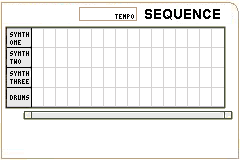
<style>
.page{position:relative;width:240px;height:160px;background:#ffffff}
.page>*{position:absolute;margin:0}
.t1{font:7px "Terminal";color:#000000}
.t2{font:14px "Arial-BoldMT";color:#000000}
</style>
<div class="page">
<p class="t1" style="left:115px;top:14px;width:19px;height:5px">TEMPO</p>
<p class="t2" style="left:145px;top:9px;width:75px;height:11px">SEQUENCE</p>
<p class="t1" style="left:10px;top:32px;width:19px;height:13px">SYNTH<br>ONE</p>
<p class="t1" style="left:10px;top:51px;width:19px;height:13px">SYNTH<br>TWO</p>
<p class="t1" style="left:10px;top:71px;width:19px;height:13px">SYNTH<br>THREE</p>
<p class="t1" style="left:10px;top:95px;width:19px;height:5px">DRUMS</p>
</div>
